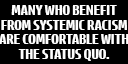
<style>
.page{position:relative;width:128px;height:64px;background:#000000}
.page>*{position:absolute;margin:0}
.t1{font:12.7px/14.6px "HPSimplified-Bold";letter-spacing:-0.01em;color:#ffffff}
</style>
<div class="page">
<p class="t1" style="left:0px;top:5px;width:129px;height:56px;text-align:center">MANY WHO BENEFIT<br>FROM SYSTEMIC RACISM<br>ARE COMFORTABLE WITH<br>THE STATUS QUO.</p>
</div>
